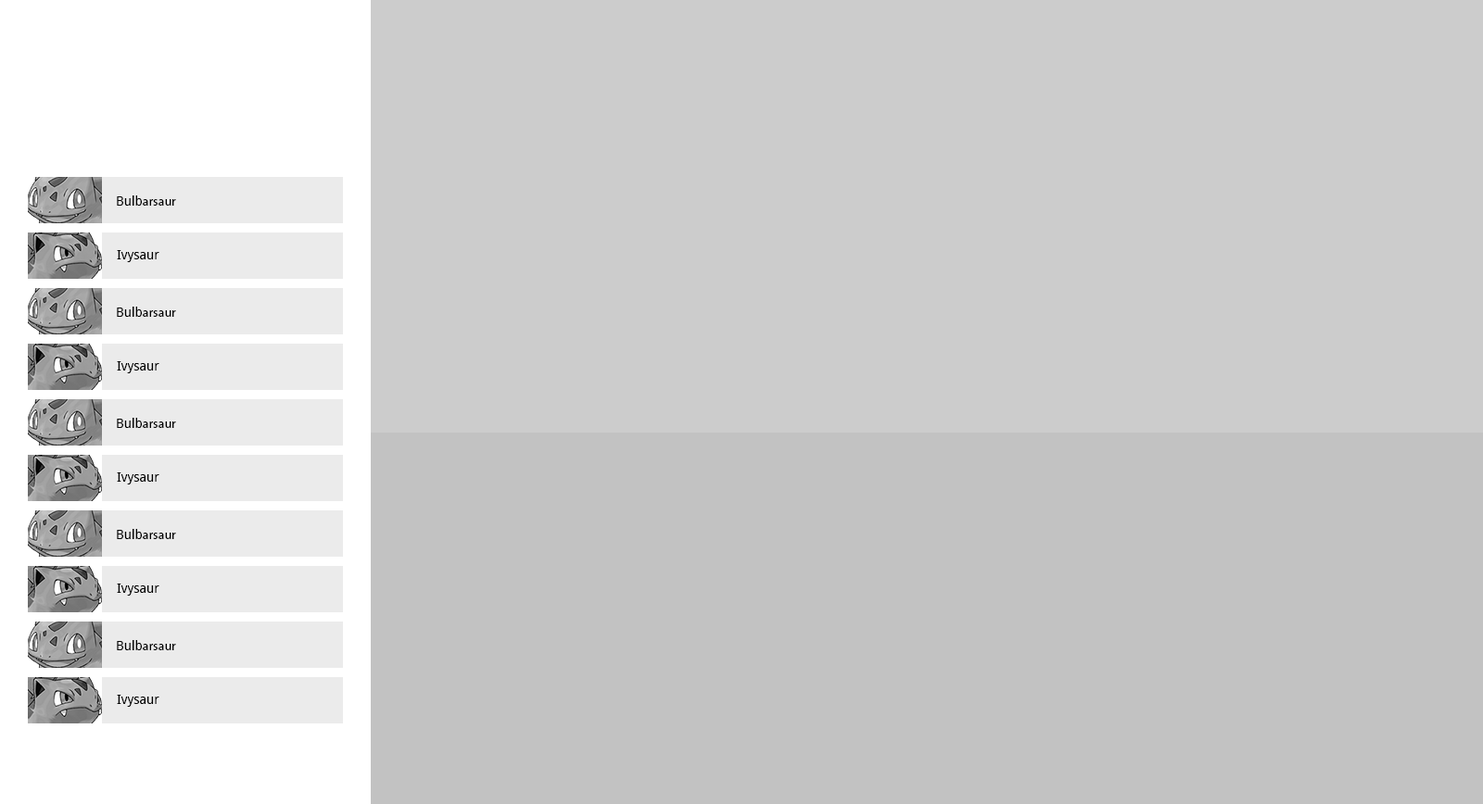
<style>
.page{position:relative;width:1483px;height:804px;background:#cccccc}
.page>*{position:absolute;margin:0}
.t1{font:13px "MyriadPro-Regular";color:#000000}
.t2{font:13px "DroidSans";color:#000000}
</style>
<div class="page">
<p class="t1" style="left:117px;top:196px;width:59px;height:10px"><span class="t2">Bulb</span>arsaur</p>
<p class="t2" style="left:117px;top:250px;width:42px;height:12px">Ivysaur</p>
<p class="t1" style="left:117px;top:307px;width:59px;height:10px"><span class="t2">Bulb</span>arsaur</p>
<p class="t2" style="left:117px;top:361px;width:42px;height:12px">Ivysaur</p>
<p class="t1" style="left:117px;top:418px;width:59px;height:10px"><span class="t2">Bulb</span>arsaur</p>
<p class="t2" style="left:117px;top:473px;width:42px;height:12px">Ivysaur</p>
<p class="t1" style="left:117px;top:529px;width:59px;height:10px"><span class="t2">Bulb</span>arsaur</p>
<p class="t2" style="left:117px;top:584px;width:42px;height:12px">Ivysaur</p>
<p class="t1" style="left:117px;top:640px;width:59px;height:10px"><span class="t2">Bulb</span>arsaur</p>
<p class="t2" style="left:117px;top:695px;width:42px;height:12px">Ivysaur</p>
</div>
